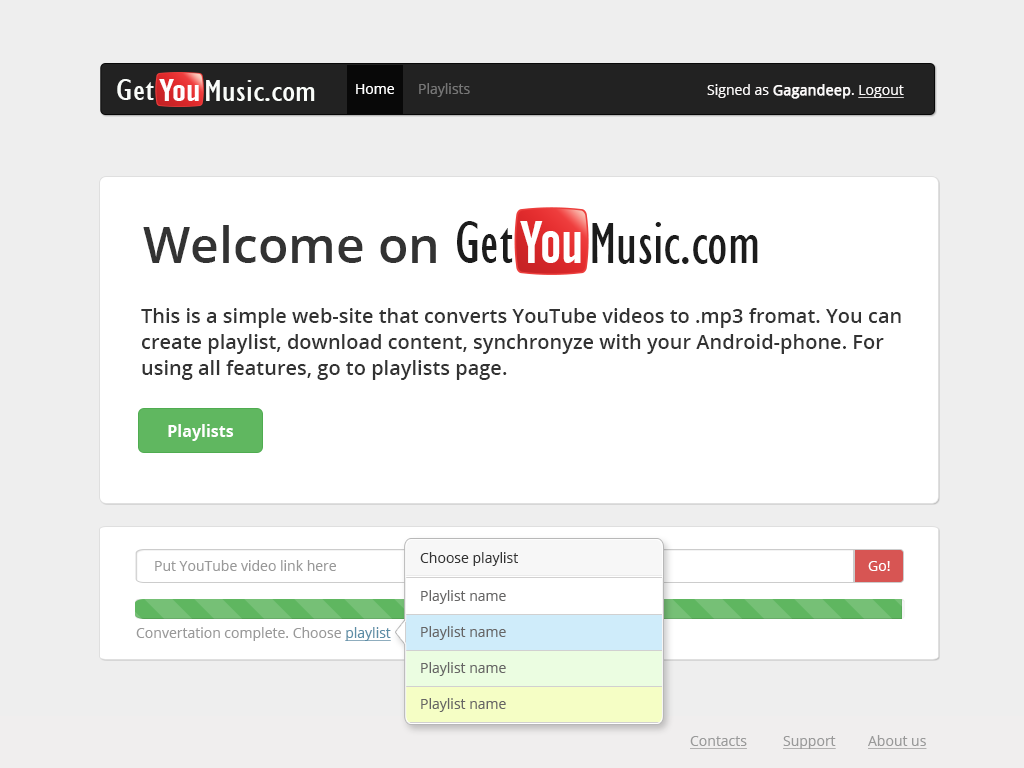
<style>
.page{position:relative;width:1024px;height:768px;background:#ffffff}
.page>*{position:absolute;margin:0}
.t1{font:31px "GillSansMT-Condensed";color:#fafdfa;scale:1.27 1}
.t2{font:31px "AlternateGothicNo2BT-Regular";color:#fffefe;scale:1.27 1}
.t3{font:14px "OpenSans";color:#ffffff}
.t4{font:14px "OpenSans";color:#777777}
.t5{font:14px "OpenSans";color:#fbf9f9}
.t6{font:14px "OpenSans";color:#fbf9f9;font-weight:bold}
.t7{font:14px "OpenSans";color:#fbf9f9;text-decoration:underline}
.t8{font:60px "GillSansMT-Condensed";color:#1c1c1c}
.t9{font:60px "AlternateGothicNo2BT-Regular";color:#fffefe}
.t10{font:50px "OpenSans-Semibold";color:#333333}
.t11{font:20px/26px "OpenSans-Semibold";color:#333333}
.t12{font:16px "OpenSans-Bold";color:#ffffff}
.t13{font:14px "OpenSans";color:#333333}
.t14{font:14px "OpenSans";color:#999999}
.t15{font:14px "OpenSans";color:#666565}
.t16{font:14px "OpenSans";color:#5c8da6;text-decoration:underline}
.t17{font:14px "OpenSans";color:#999999;text-decoration:underline}
</style>
<div class="page">
<p class="t1" style="left:117px;top:79px;width:37px;height:21px">Get</p>
<p class="t2" style="left:159px;top:79px;width:40px;height:22px">You</p>
<p class="t1" style="left:206px;top:80px;width:58px;height:21px">Music</p>
<p class="t1" style="left:265px;top:87px;width:50px;height:14px">.com</p>
<p class="t3" style="left:356px;top:84px;width:38px;height:10px">Home</p>
<p class="t4" style="left:419px;top:83px;width:51px;height:14px">Playlists</p>
<p class="t5" style="left:707px;top:84px;width:197px;height:15px">Signed as <span class="t6">Gagandeep</span>. <span class="t7">Logout</span></p>
<p class="t8" style="left:457px;top:221px;width:56px;height:42px">Get</p>
<p class="t9" style="left:520px;top:221px;width:61px;height:42px">You</p>
<p class="t8" style="left:592px;top:222px;width:88px;height:42px">Music</p>
<p class="t10" style="left:143px;top:225px;width:293px;height:38px">Welcome on</p>
<p class="t8" style="left:682px;top:235px;width:76px;height:29px">.com</p>
<p class="t11" style="left:141px;top:308px;width:760px;height:72px">This is a simple web-site that converts YouTube videos to .mp3 fromat. You can<br>create playlist, download content, synchronyze with your Android-phone. For<br>using all features, go to playlists page.</p>
<p class="t12" style="left:168px;top:424px;width:66px;height:17px">Playlists</p>
<p class="t13" style="left:420px;top:552px;width:98px;height:14px">Choose playlist</p>
<p class="t14" style="left:155px;top:560px;width:181px;height:11px">Put YouTube video link here</p>
<p class="t3" style="left:868px;top:561px;width:22px;height:10px">Go!</p>
<p class="t15" style="left:421px;top:590px;width:85px;height:14px">Playlist name</p>
<p class="t14" style="left:136px;top:627px;width:255px;height:14px">Convertation complete. Choose <span class="t16">playlist</span></p>
<p class="t15" style="left:421px;top:626px;width:85px;height:14px">Playlist name</p>
<p class="t15" style="left:421px;top:662px;width:85px;height:14px">Playlist name</p>
<p class="t15" style="left:421px;top:698px;width:85px;height:14px">Playlist name</p>
<p class="t17" style="left:690px;top:736px;width:57px;height:13px">Contacts</p>
<p class="t17" style="left:783px;top:736px;width:53px;height:13px">Support</p>
<p class="t17" style="left:868px;top:735px;width:59px;height:14px">About us</p>
</div>
